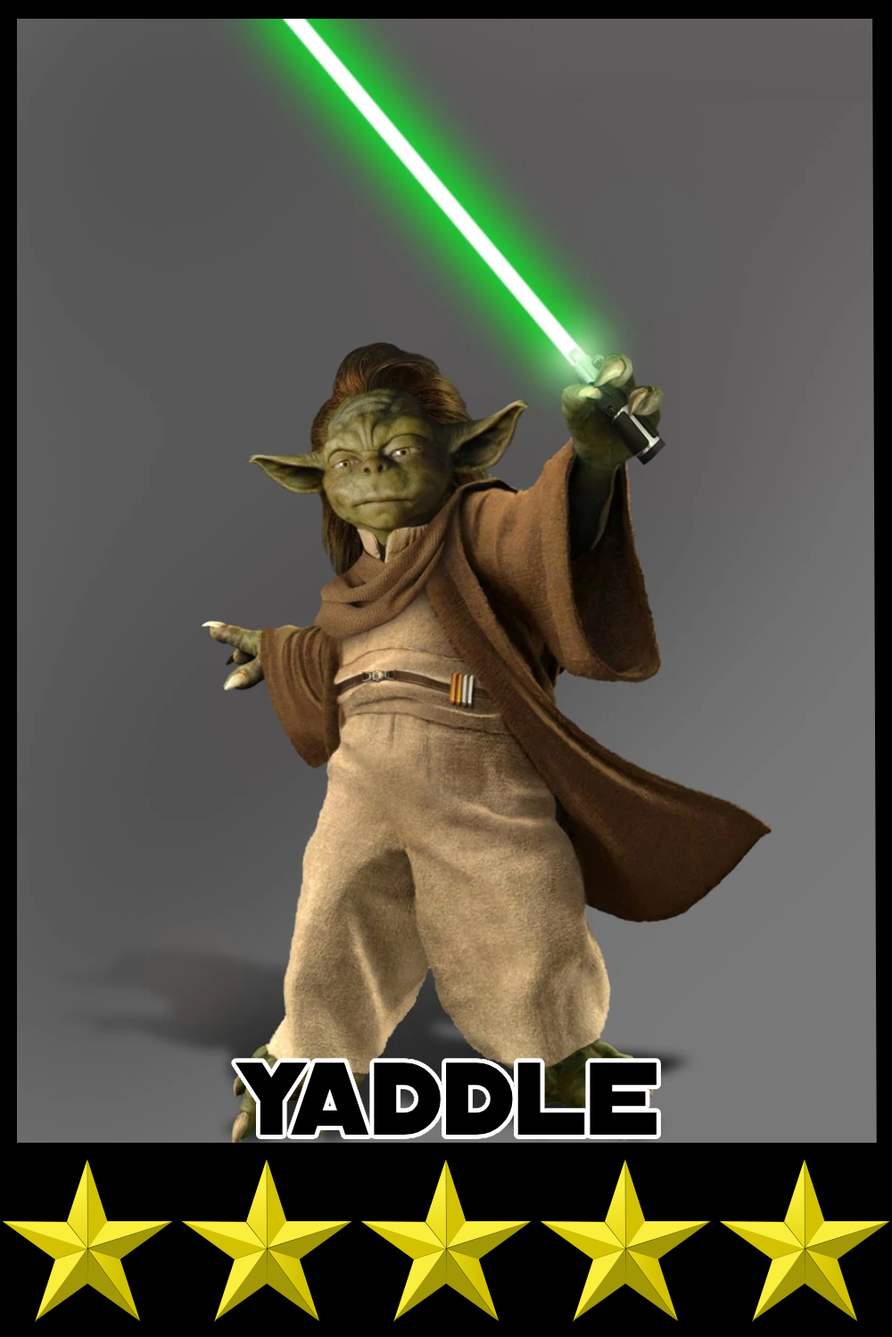
<style>
.page{position:relative;width:892px;height:1337px}
.page>*{position:absolute;margin:0}
.t1{font:110.7px "DistantGalaxy";color:#000000}
</style>
<div class="page">
<p class="t1" style="left:235px;top:1063px;width:421px;height:72px">yaddle</p>
</div>
